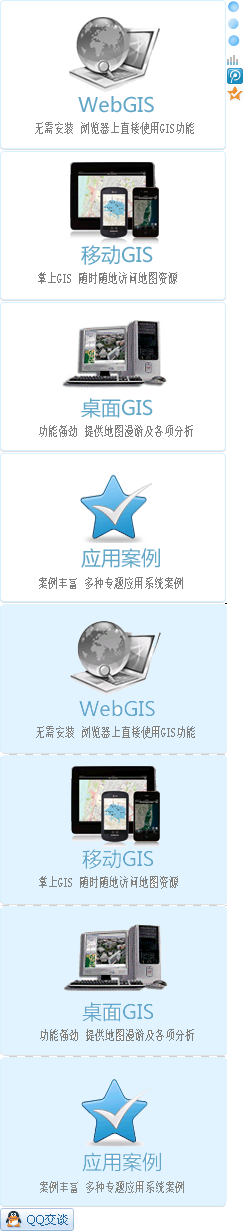
<style>
.page{position:relative;width:243px;height:1231px;background:#ffffff}
.page>*{position:absolute;margin:0}
.t1{font:20px "MicrosoftYaHei";color:#63a7c8}
.t2{font:14px "SimSun";color:#7c7c7c;scale:0.7 1}
</style>
<div class="page">
<p class="t1" style="left:78px;top:96px;width:76px;height:17px">WebGIS</p>
<p class="t2" style="left:35px;top:122px;width:159px;height:13px">无需安装 浏览器上直接使用GIS功能</p>
<p class="t1" style="left:81px;top:245px;width:72px;height:20px">移动GIS</p>
<p class="t2" style="left:38px;top:272px;width:139px;height:13px">掌上GIS 随时随地访问地图资源</p>
<p class="t1" style="left:81px;top:398px;width:72px;height:20px">桌面GIS</p>
<p class="t2" style="left:39px;top:425px;width:154px;height:12px">功能强劲 提供地图漫游及各项分析</p>
<p class="t1" style="left:81px;top:548px;width:79px;height:20px">应用案例</p>
<p class="t2" style="left:39px;top:577px;width:144px;height:12px">案例丰富 多种专题应用系统案例</p>
</div>
